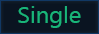
<style>
.page{position:relative;width:99px;height:34px;background:#0a1421}
.page>*{position:absolute;margin:0}
.t1{font:23.3px "SegoeUISymbol";color:#19b579}
</style>
<div class="page">
<p class="t1" style="left:18px;top:6px;width:63px;height:22px">Single</p>
</div>
